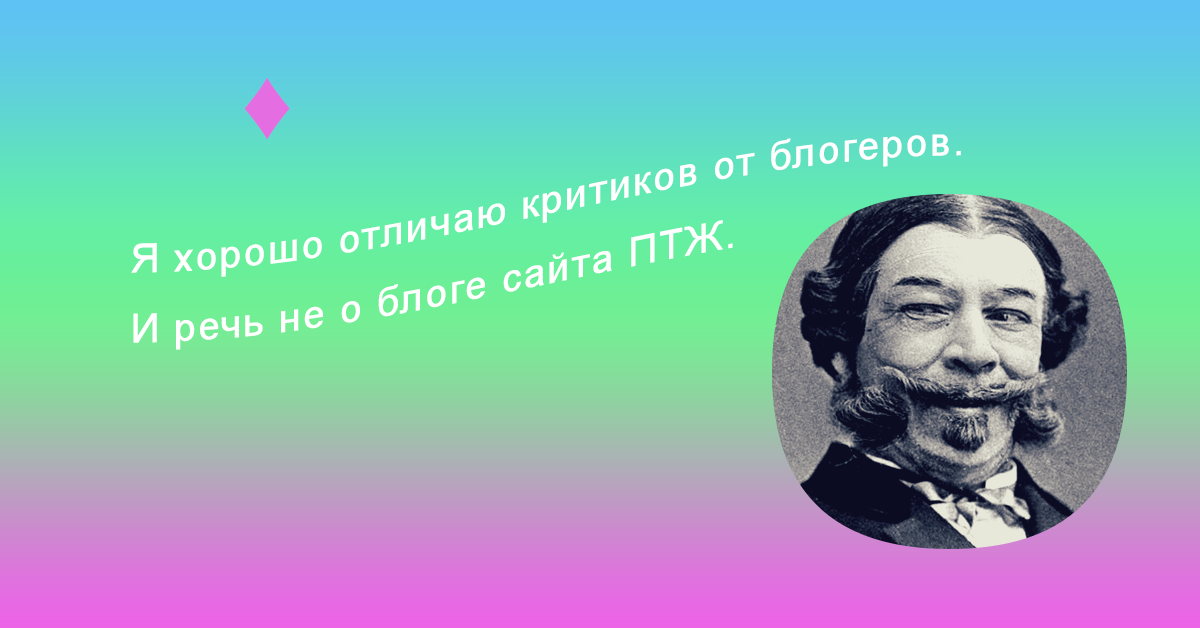
<style>
.page{position:relative;width:1200px;height:628px}
.page>*{position:absolute;margin:0}
.t1{font:100px "ArialMT";letter-spacing:0.045em;color:#e46de1}
.t2{font:40px "ArialMT";letter-spacing:0.045em;color:#ffffff}
</style>
<div class="page">
<p class="t1" style="left:244px;top:77px;width:46px;height:63px">♦</p>
<p class="t2" style="left:131px;top:134px;width:830px;height:216px">Я хорошо отличаю критиков от блогеров.<br>И речь не о блоге сайта ПТЖ.</p>
</div>
